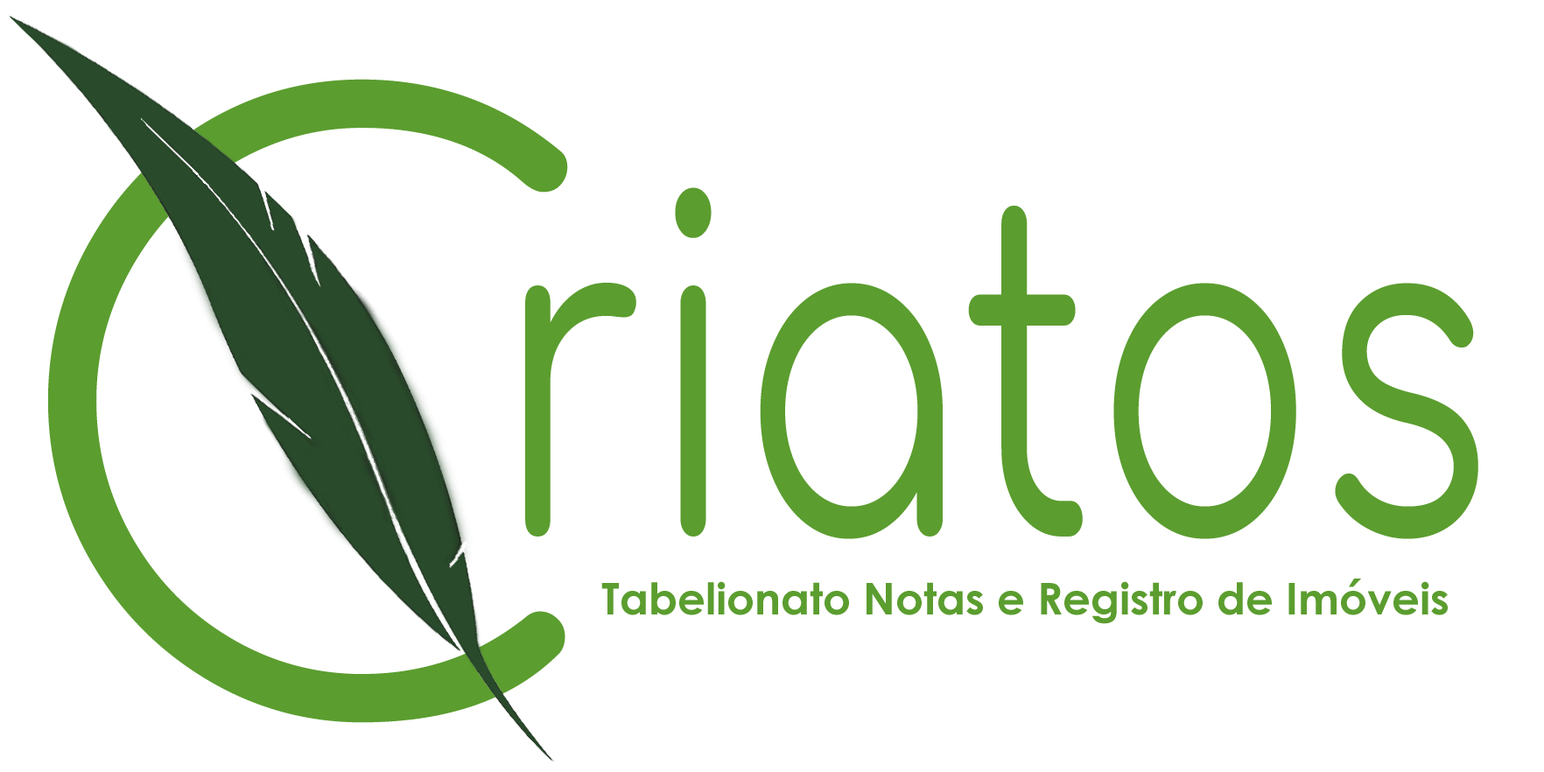
<style>
.page{position:relative;width:1544px;height:772px;background:#ffffff}
.page>*{position:absolute;margin:0}
.t1{font:458.7px "Comfortaa-Regular";color:#5b9d2f;scale:0.71 1}
.t2{font:43.8px "CenturyGothic-Bold";color:#5b9d2f}
</style>
<div class="page">
<p class="t1" style="left:525px;top:187px;width:954px;height:352px">riatos</p>
<p class="t2" style="left:601px;top:579px;width:847px;height:45px">Tabelionato Notas e Registro de Imóveis</p>
</div>
